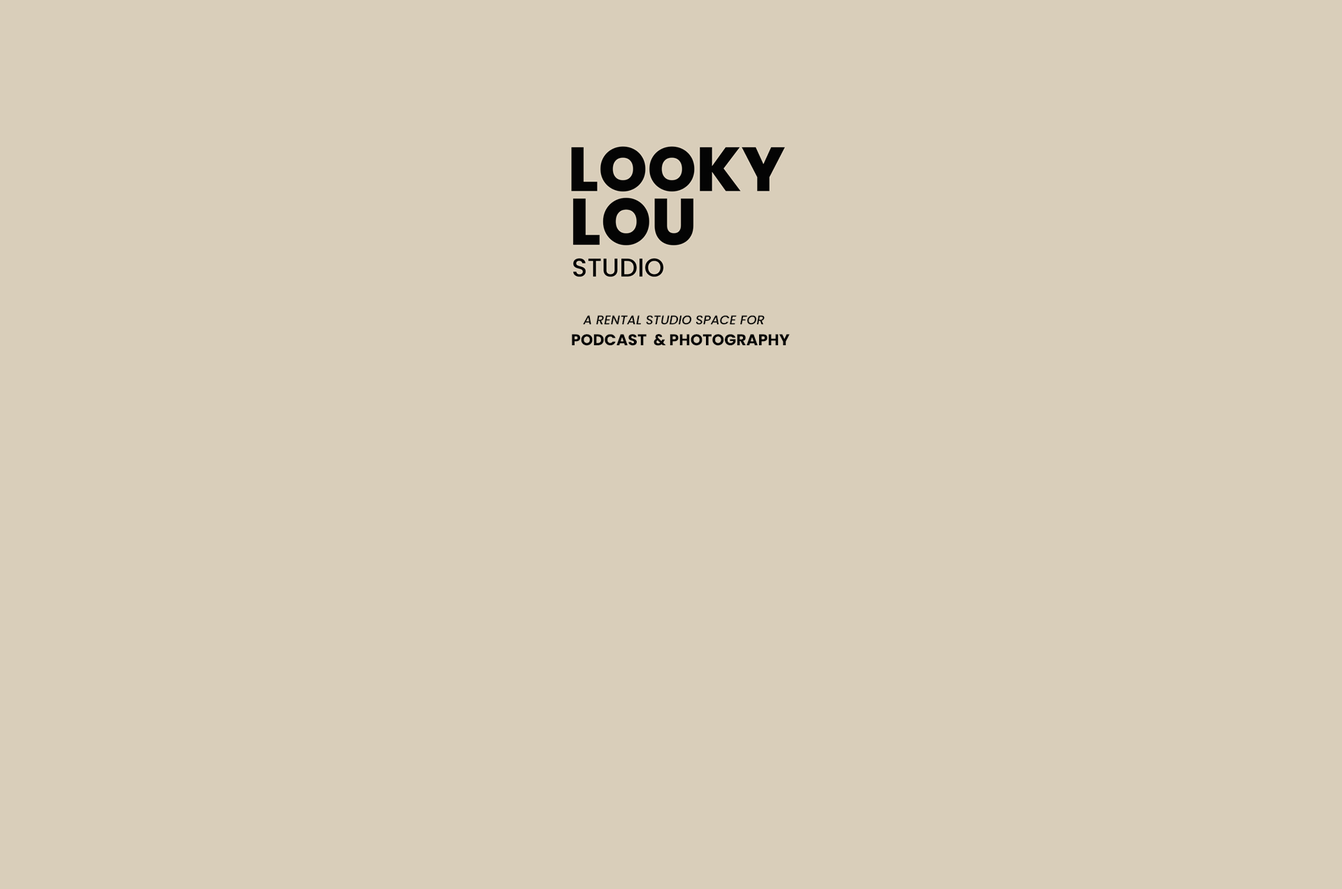
<style>
.page{position:relative;width:1342px;height:889px;background:#d9ceba}
.page>*{position:absolute;margin:0}
.t1{font:12.5px "Poppins-MediumItalic";color:#040404}
.t2{font:15.6px "Poppins-Bold";color:#040404}
</style>
<div class="page">
<p class="t1" style="left:583px;top:315px;width:181px;height:10px">A RENTAL STUDIO SPACE FOR</p>
<p class="t2" style="left:572px;top:334px;width:218px;height:12px">PODCAST  &amp; PHOTOGRAPHY</p>
</div>
